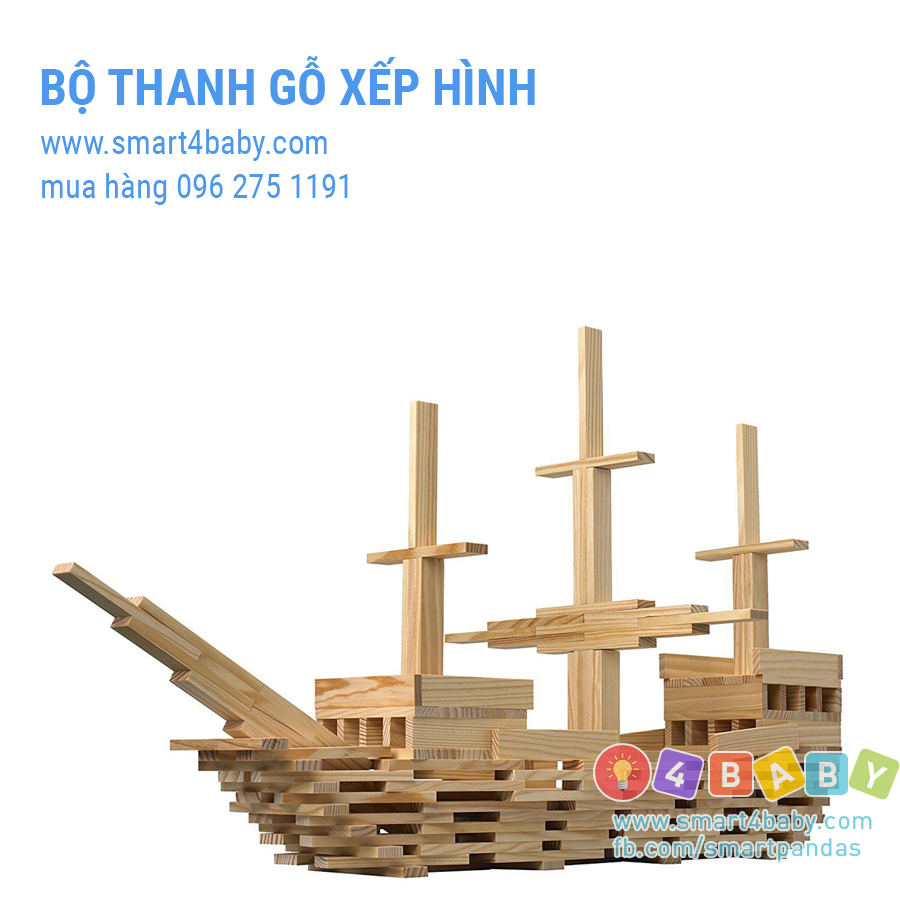
<style>
.page{position:relative;width:900px;height:900px;background:#ffffff}
.page>*{position:absolute;margin:0}
.t1{font:50px "RobotoCondensed-Bold";color:#4c98ed}
.t2{font:33px "RobotoCondensed-Regular";color:#4c98ed}
</style>
<div class="page">
<p class="t1" style="left:41px;top:56px;width:494px;height:58px">BỘ THANH GỖ XẾP HÌNH</p>
<p class="t2" style="left:40px;top:129px;width:287px;height:32px">www.smart4baby.com</p>
<p class="t2" style="left:42px;top:173px;width:306px;height:32px">mua hàng 096 275 1191</p>
</div>
